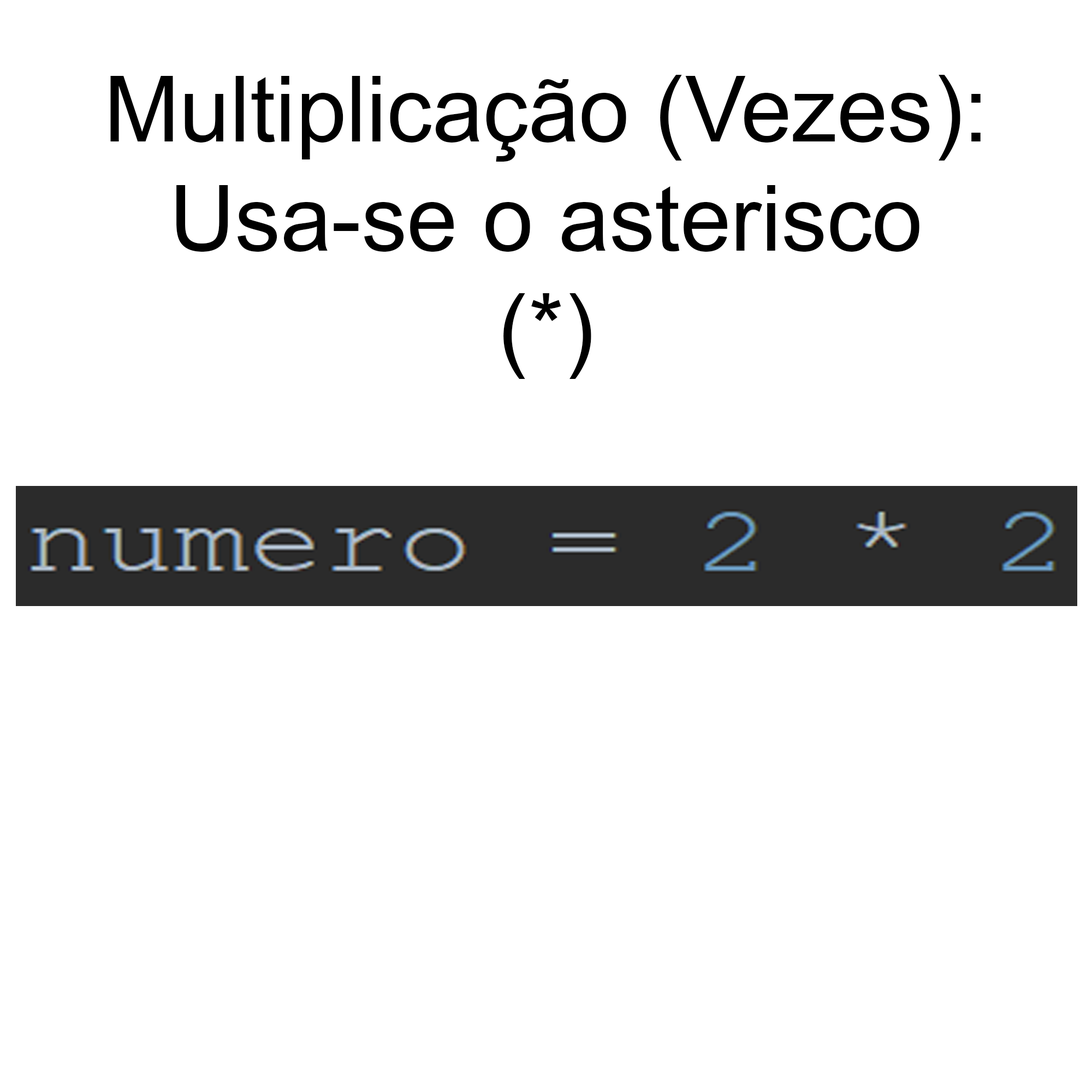
<style>
.page{position:relative;width:1092px;height:1092px;background:#ffffff}
.page>*{position:absolute;margin:0}
.t1{font:91px "ArialMT";color:#000000}
</style>
<div class="page">
<p class="t1" style="left:110px;top:75px;width:871px;height:304px;text-align:center">Multiplicação (Vezes):<br>Usa-se o asterisco<br>(*)</p>
</div>
